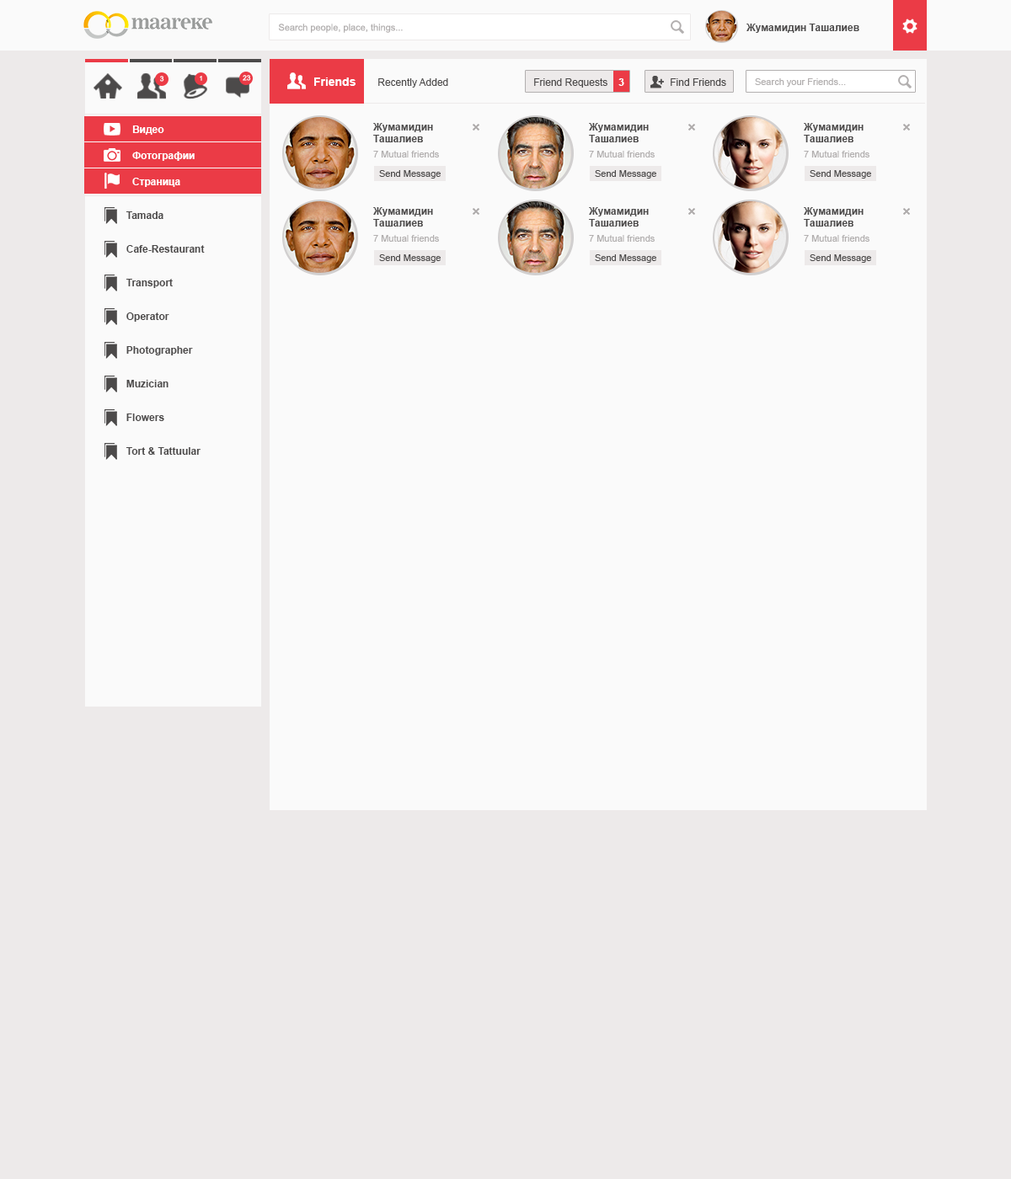
<style>
.page{position:relative;width:1011px;height:1179px;background:#fafafa}
.page>*{position:absolute;margin:0}
.t1{font:9.3px "ArialMT";color:#b2afaf}
.t2{font:10.1px "Arial-BoldMT";color:#4c4a4a}
.t3{font:7.1px "ArialMT";color:#fefafa}
.t4{font:6.7px "ArialMT";color:#fefafa}
.t5{font:11.8px "Arial-BoldMT";color:#ffffff}
.t6{font:10.1px "ArialMT";color:#4c4a4a}
.t7{font:10.1px "Arial-BoldMT";color:#ffffff}
.t8{font:9.3px "ArialMT";color:#4c4a4a}
</style>
<div class="page">
<p class="t1" style="left:278px;top:24px;width:125px;height:9px">Search people, place, things...</p>
<p class="t2" style="left:746px;top:24px;width:113px;height:9px">Жумамидин Ташалиев</p>
<p class="t3" style="left:160px;top:76px;width:4px;height:6px">3</p>
<p class="t4" style="left:200px;top:76px;width:2px;height:5px">1</p>
<p class="t3" style="left:243px;top:75px;width:8px;height:6px">23</p>
<p class="t5" style="left:314px;top:78px;width:42px;height:8px">Friends</p>
<p class="t6" style="left:378px;top:78px;width:70px;height:10px">Recently Added</p>
<p class="t6" style="left:534px;top:78px;width:73px;height:10px">Friend Requests</p>
<p class="t7" style="left:618px;top:78px;width:6px;height:8px">3</p>
<p class="t6" style="left:671px;top:78px;width:55px;height:8px">Find Friends</p>
<p class="t1" style="left:755px;top:78px;width:91px;height:9px">Search your Friends...</p>
<p class="t7" style="left:132px;top:126px;width:32px;height:9px">Видео</p>
<p class="t2" style="left:373px;top:123px;width:60px;height:19px">Жумамидин <br>Ташалиев</p>
<p class="t2" style="left:589px;top:123px;width:60px;height:19px">Жумамидин <br>Ташалиев</p>
<p class="t2" style="left:804px;top:123px;width:60px;height:19px">Жумамидин <br>Ташалиев</p>
<p class="t7" style="left:132px;top:152px;width:63px;height:9px">Фотографии</p>
<p class="t1" style="left:373px;top:151px;width:66px;height:7px">7 Mutual friends</p>
<p class="t1" style="left:589px;top:151px;width:66px;height:7px">7 Mutual friends</p>
<p class="t1" style="left:804px;top:151px;width:65px;height:7px">7 Mutual friends</p>
<p class="t8" style="left:379px;top:170px;width:62px;height:9px">Send Message</p>
<p class="t8" style="left:595px;top:170px;width:61px;height:9px">Send Message</p>
<p class="t8" style="left:810px;top:170px;width:61px;height:9px">Send Message</p>
<p class="t7" style="left:132px;top:178px;width:48px;height:9px">Страница</p>
<p class="t2" style="left:373px;top:207px;width:60px;height:20px">Жумамидин <br>Ташалиев</p>
<p class="t2" style="left:589px;top:207px;width:60px;height:20px">Жумамидин <br>Ташалиев</p>
<p class="t2" style="left:804px;top:207px;width:60px;height:20px">Жумамидин <br>Ташалиев</p>
<p class="t2" style="left:126px;top:211px;width:37px;height:8px">Tamada</p>
<p class="t2" style="left:126px;top:245px;width:79px;height:8px">Cafe-Restaurant</p>
<p class="t1" style="left:373px;top:235px;width:66px;height:7px">7 Mutual friends</p>
<p class="t1" style="left:589px;top:235px;width:66px;height:7px">7 Mutual friends</p>
<p class="t1" style="left:804px;top:235px;width:65px;height:7px">7 Mutual friends</p>
<p class="t8" style="left:379px;top:254px;width:62px;height:9px">Send Message</p>
<p class="t8" style="left:595px;top:254px;width:61px;height:9px">Send Message</p>
<p class="t8" style="left:810px;top:254px;width:61px;height:9px">Send Message</p>
<p class="t2" style="left:126px;top:279px;width:47px;height:9px">Transport</p>
<p class="t2" style="left:126px;top:313px;width:43px;height:9px">Operator</p>
<p class="t2" style="left:126px;top:346px;width:67px;height:10px">Photographer</p>
<p class="t2" style="left:126px;top:380px;width:42px;height:8px">Muzician</p>
<p class="t2" style="left:126px;top:414px;width:38px;height:7px">Flowers</p>
<p class="t2" style="left:126px;top:447px;width:75px;height:8px">Tort &amp; Tattuular</p>
</div>
